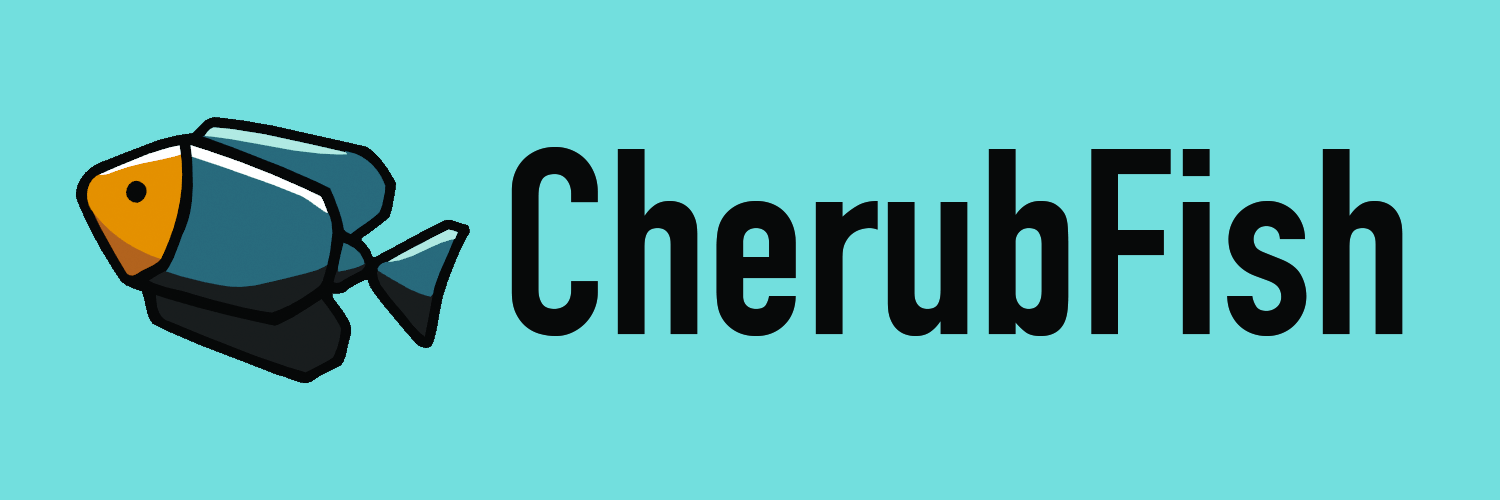
<style>
.page{position:relative;width:1500px;height:500px;background:#72dfde}
.page>*{position:absolute;margin:0}
.t1{font:260px "DINCondensed-Bold";color:#070909}
</style>
<div class="page">
<p class="t1" style="left:511px;top:147px;width:892px;height:189px">CherubFish</p>
</div>
